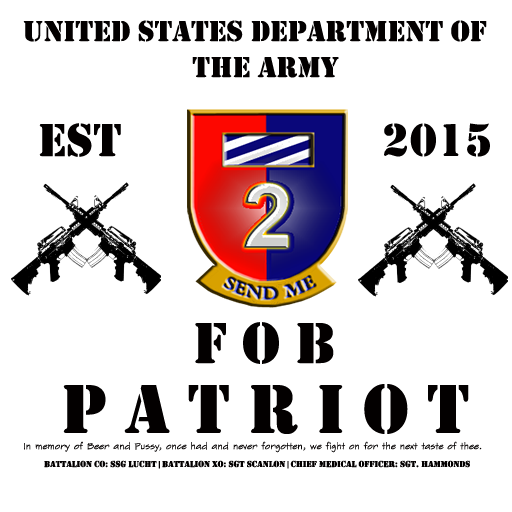
<style>
.page{position:relative;width:512px;height:512px;background:#ffffff}
.page>*{position:absolute;margin:0}
.t1{font:30px "Stencil";color:#030000}
.t2{font:48px "Stencil";color:#030000}
.t3{font:60px "Stencil";color:#030000}
.t4{font:72px "Stencil";color:#030000}
.t5{font:9px "SketchFlowPrint";color:#030000}
.t6{font:9px "Stencil";color:#030000}
</style>
<div class="page">
<p class="t1" style="left:23px;top:20px;width:464px;height:58px">united states department of <br>the army</p>
<p class="t2" style="left:39px;top:123px;width:82px;height:34px">est</p>
<p class="t2" style="left:384px;top:123px;width:106px;height:34px">2015</p>
<p class="t3" style="left:195px;top:322px;width:139px;height:42px">F o b</p>
<p class="t4" style="left:63px;top:384px;width:406px;height:50px">p a t r i o t</p>
<p class="t5" style="left:24px;top:441px;width:458px;height:12px">In memory of Beer and Pussy, once had and never forgotten, we fight on for the next taste of thee.</p>
<p class="t6" style="left:44px;top:460px;width:426px;height:9px">Battalion CO: SSG Lucht | Battalion XO: Sgt Scanlon | Chief Medical Officer: Sgt. Hammonds</p>
</div>
